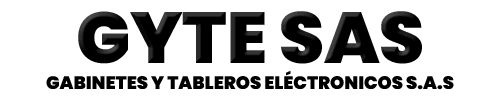
<style>
.page{position:relative;width:500px;height:100px;background:#ffffff}
.page>*{position:absolute;margin:0}
.t1{font:72px "Poppins-Black";color:#000000;text-transform:uppercase}
.t2{font:18px "Poppins-Black";color:#000000;text-transform:uppercase}
</style>
<div class="page">
<p class="t1" style="left:78px;top:11px;width:344px;height:53px">gyte sas</p>
<p class="t2" style="left:46px;top:70px;width:408px;height:20px">gabinetes y tableros eléctronicos s.a.s</p>
</div>
